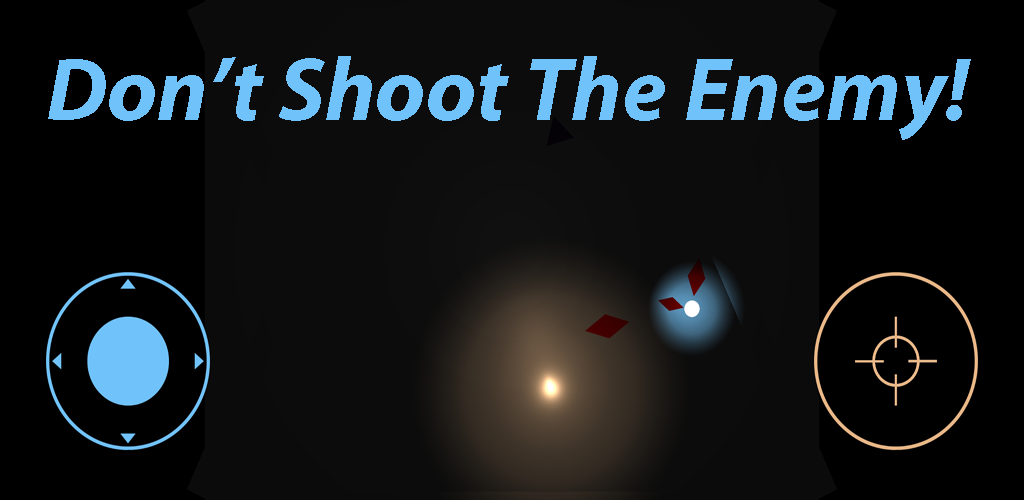
<style>
.page{position:relative;width:1024px;height:500px;background:#000000}
.page>*{position:absolute;margin:0}
.t1{font:90px "MyriadPro-BoldIt";color:#70c2fa}
</style>
<div class="page">
<p class="t1" style="left:48px;top:56px;width:923px;height:84px">Don’t Shoot The Enemy!</p>
</div>
